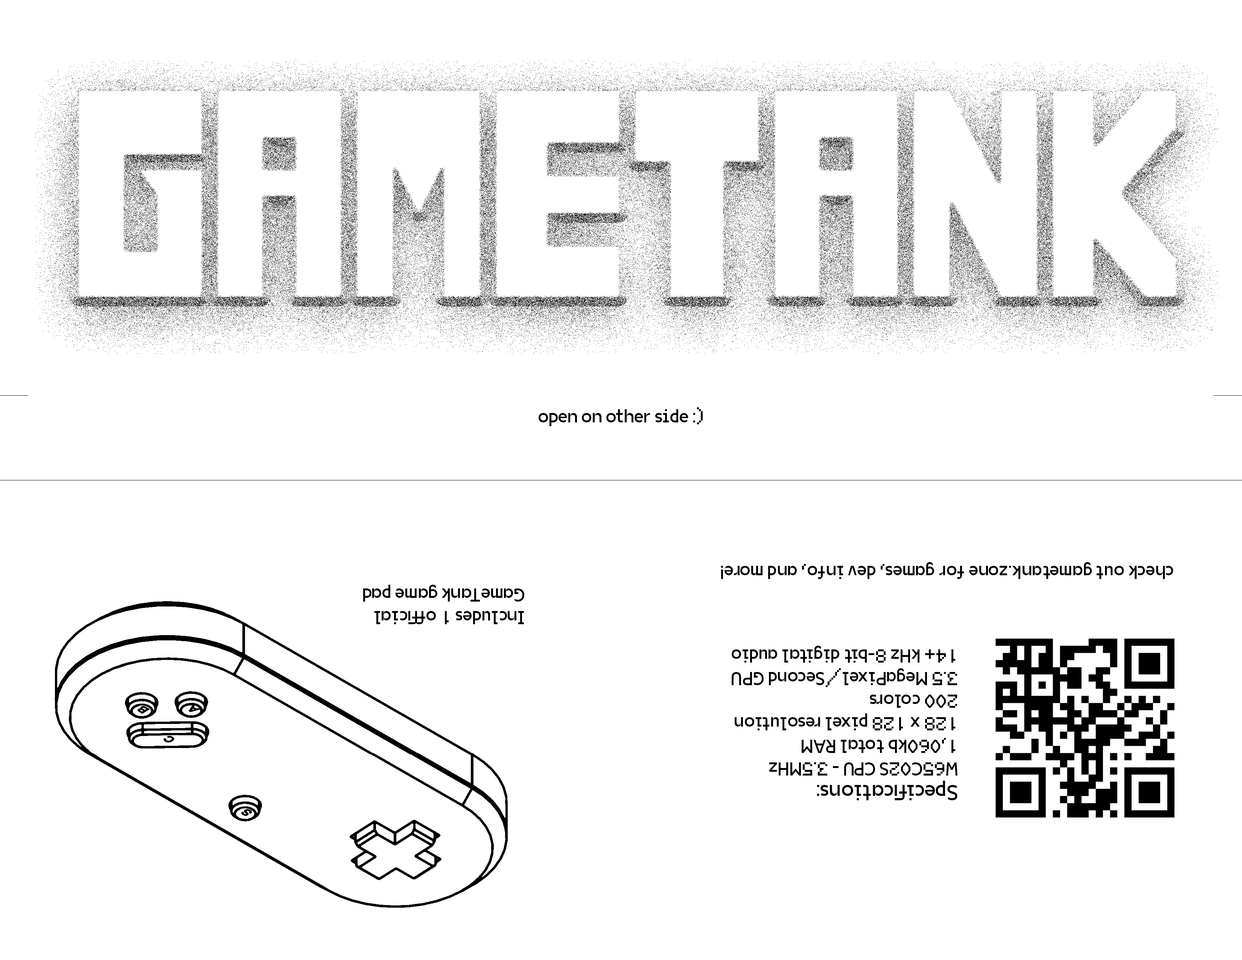
<style>
.page{position:relative;width:1242px;height:960px;background:#ffffff}
.page>*{position:absolute;margin:0}
.t1{font:18.8px "VG5000-Regular";color:#000000}
.t2{font:22px "VG5000-Regular";color:#000000}
</style>
<div class="page">
<p class="t1" style="left:539px;top:407px;width:164px;height:19px">open on other side :)</p>
<p class="t1" style="left:721px;top:562px;width:452px;height:17px;rotate:180deg">check out gametank.zone for games, dev info, and more!</p>
<p class="t1" style="left:363px;top:585px;width:161px;height:39px;rotate:180deg">Includes 1 official<br>GameTank game pad</p>
<p class="t1" style="left:732px;top:646px;width:226px;height:154px;rotate:180deg"><span class="t2">Specifications:<br></span>W65C02S CPU - 3.5MHz<br>1,060kb total RAM<br>128 x 128 pixel resolution<br>200 colors<br>3.5 MegaPixel/Second GPU<br>14+ kHz 8-bit digital audio</p>
</div>
